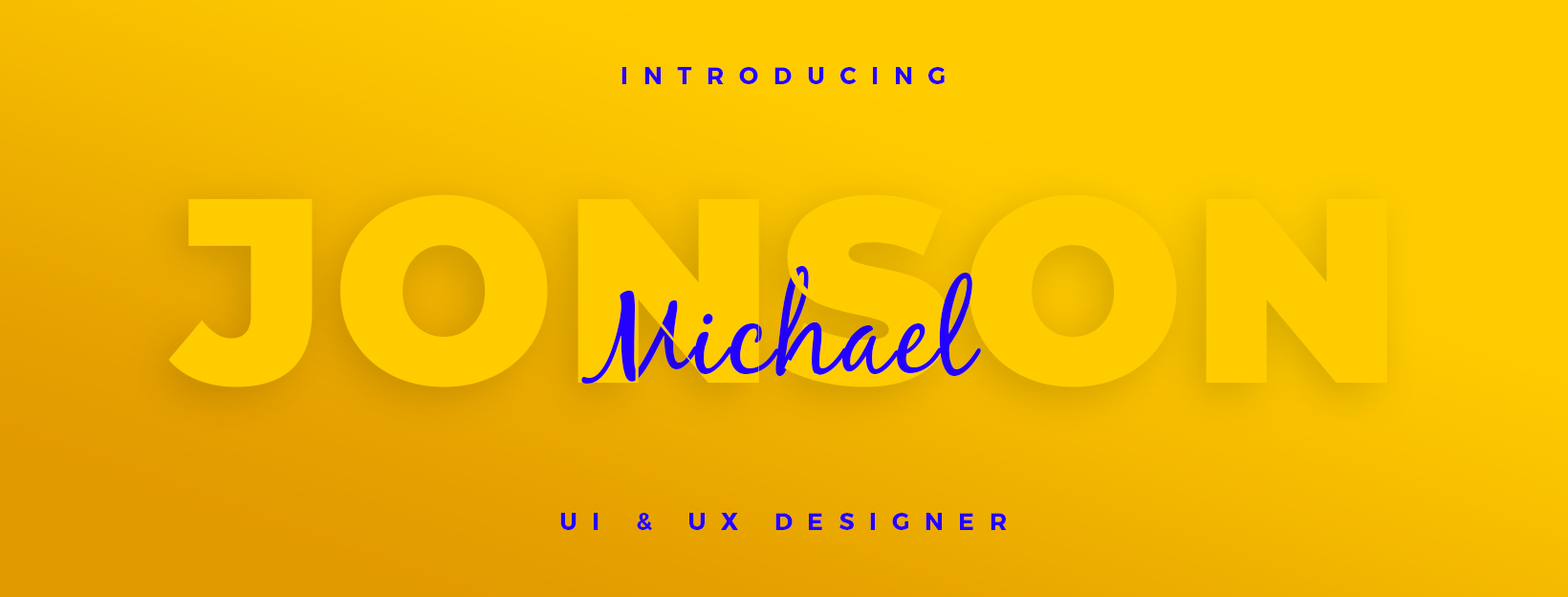
<style>
.page{position:relative;width:1568px;height:597px;background:#ffcc00}
.page>*{position:absolute;margin:0}
.t1{font:23.9px "Montserrat-Bold";letter-spacing:0.63em;color:#2400ff;text-transform:uppercase}
.t2{font:118.6px "BlackJackRegular";letter-spacing:0.03em;color:#2400ff}
</style>
<div class="page">
<p class="t1" style="left:621px;top:67px;width:324px;height:17px">introducing</p>
<p class="t2" style="left:581px;top:266px;width:400px;height:117px">Michael</p>
<p class="t2" style="left:581px;top:266px;width:400px;height:117px">Michael</p>
<p class="t1" style="left:560px;top:512px;width:447px;height:19px">UI &amp; UX Designer</p>
</div>
